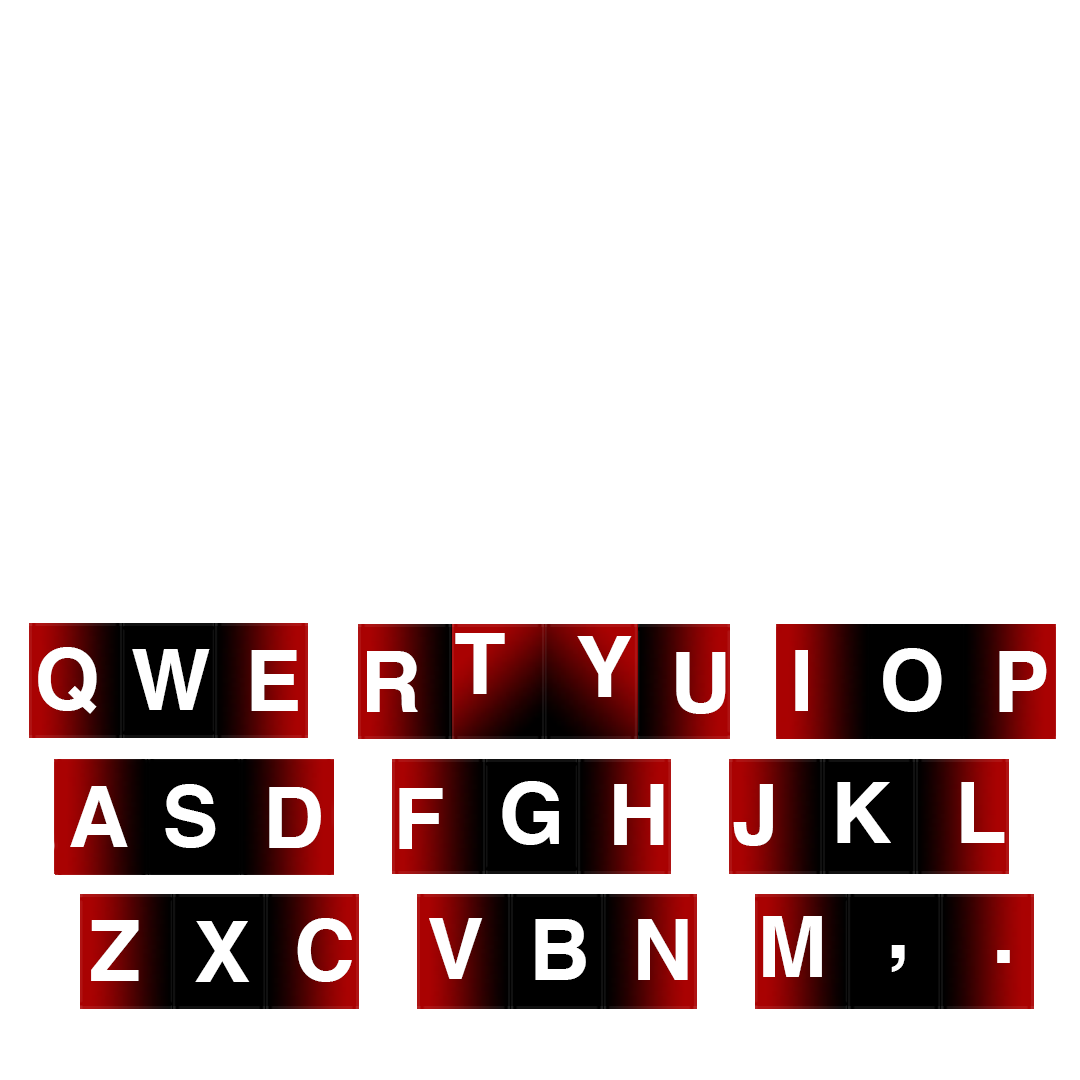
<style>
.page{position:relative;width:1080px;height:1080px;background:#ffffff}
.page>*{position:absolute;margin:0}
.t1{font:84.4px "Helvetica-Bold";letter-spacing:-0.05em;color:#ffffff}
</style>
<div class="page">
<p class="t1" style="left:455px;top:633px;width:50px;height:61px">T</p>
<p class="t1" style="left:577px;top:636px;width:55px;height:61px">Y</p>
<p class="t1" style="left:38px;top:647px;width:59px;height:67px">Q</p>
<p class="t1" style="left:132px;top:649px;width:78px;height:61px">W</p>
<p class="t1" style="left:251px;top:650px;width:47px;height:61px">E</p>
<p class="t1" style="left:367px;top:651px;width:51px;height:61px">R</p>
<p class="t1" style="left:676px;top:652px;width:50px;height:62px">U</p>
<p class="t1" style="left:795px;top:650px;width:13px;height:61px">I</p>
<p class="t1" style="left:883px;top:648px;width:59px;height:64px">O</p>
<p class="t1" style="left:999px;top:651px;width:48px;height:61px">P</p>
<p class="t1" style="left:165px;top:784px;width:51px;height:64px">S</p>
<p class="t1" style="left:502px;top:781px;width:57px;height:64px">G</p>
<p class="t1" style="left:614px;top:784px;width:50px;height:61px">H</p>
<p class="t1" style="left:733px;top:784px;width:40px;height:62px">J</p>
<p class="t1" style="left:837px;top:782px;width:54px;height:61px">K</p>
<p class="t1" style="left:961px;top:782px;width:44px;height:61px">L</p>
<p class="t1" style="left:70px;top:786px;width:58px;height:61px">A</p>
<p class="t1" style="left:269px;top:787px;width:52px;height:61px">D</p>
<p class="t1" style="left:399px;top:788px;width:44px;height:61px">F</p>
<p class="t1" style="left:297px;top:918px;width:55px;height:64px">C</p>
<p class="t1" style="left:429px;top:918px;width:54px;height:61px">V</p>
<p class="t1" style="left:763px;top:916px;width:59px;height:61px">M</p>
<p class="t1" style="left:91px;top:920px;width:48px;height:61px">Z</p>
<p class="t1" style="left:195px;top:921px;width:55px;height:61px">X</p>
<p class="t1" style="left:535px;top:919px;width:51px;height:61px">B</p>
<p class="t1" style="left:638px;top:919px;width:50px;height:61px">N</p>
<p class="t1" style="left:891px;top:945px;width:14px;height:27px">,</p>
<p class="t1" style="left:997px;top:950px;width:13px;height:13px">.</p>
</div>
